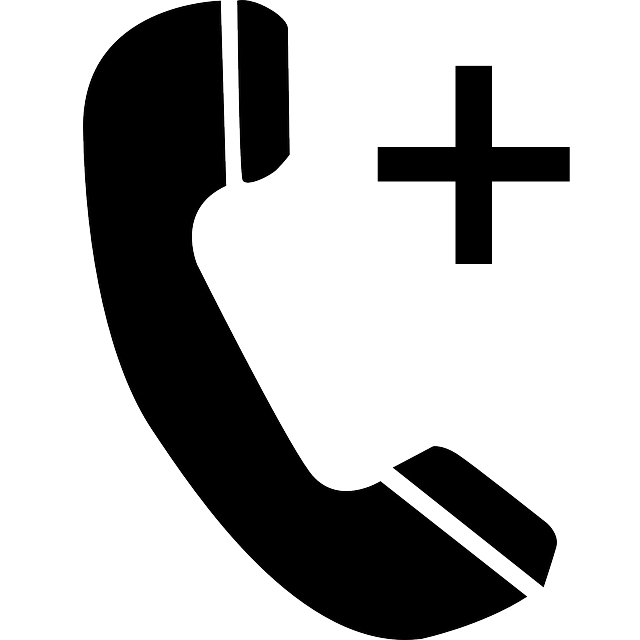
<style>
.page{position:relative;width:640px;height:640px;background:#ffffff}
.page>*{position:absolute;margin:0}
.t1{font:372px "MyriadPro-Bold";color:#000000}
</style>
<div class="page">
<p class="t1" style="left:377px;top:65px;width:193px;height:199px">+</p>
</div>
